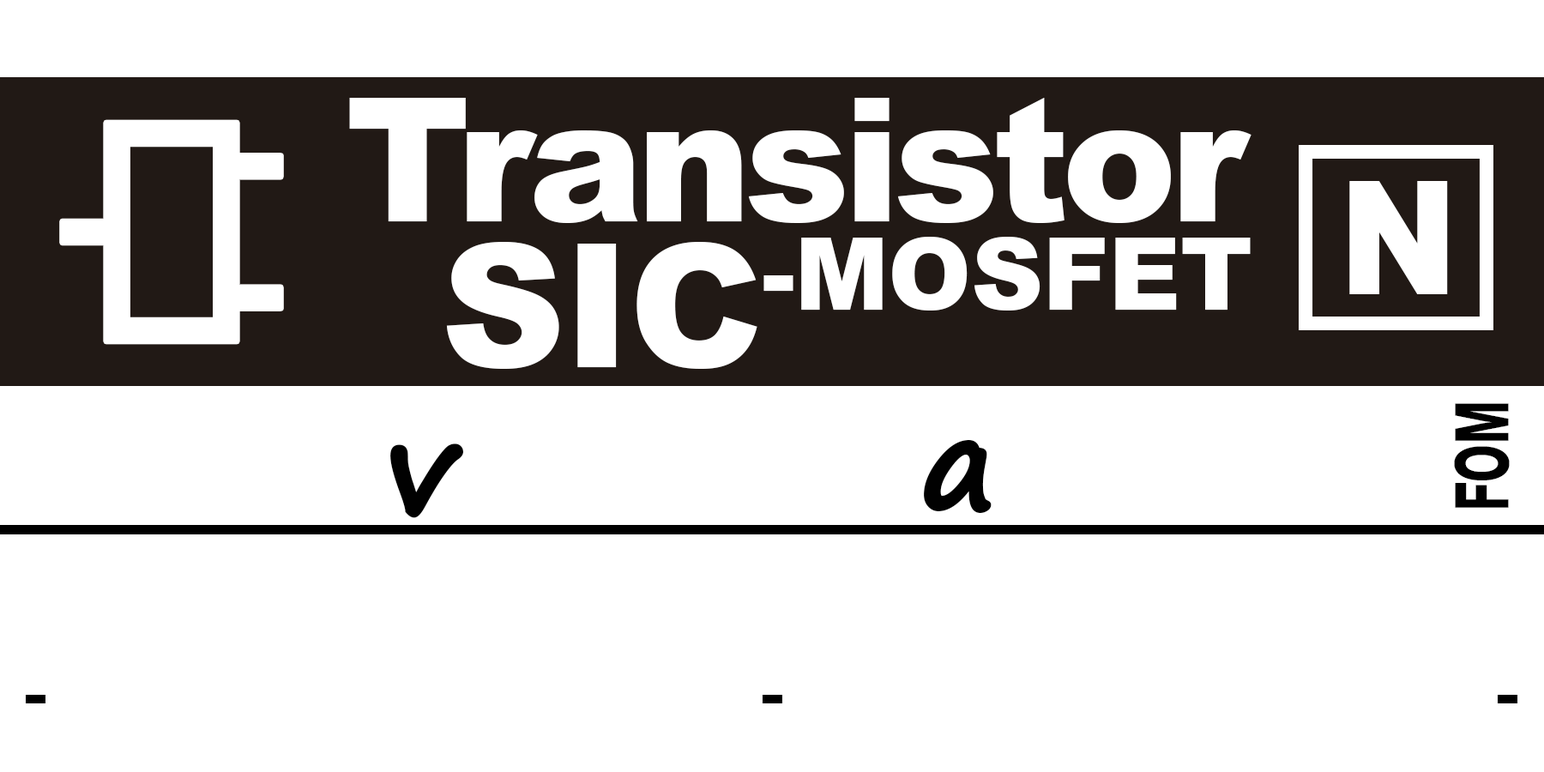
<style>
.page{position:relative;width:1544px;height:772px;background:#ffffff}
.page>*{position:absolute;margin:0}
.t1{font:172.5px/145.3px "Arial-Black";letter-spacing:-0.04em;color:#ffffff}
.t2{font:172.5px/145.3px "Arial-Black";letter-spacing:-0.01em;color:#ffffff}
.t3{font:157.9px "Arial-Black";letter-spacing:-0.01em;color:#ffffff;scale:0.9 1}
.t4{font:95.7px "Arial-BoldMT";letter-spacing:-0.025em;color:#010101;font-variant:small-caps;scale:0.62 1}
.t5{font:127.1px "SegoePrint-Bold";letter-spacing:-0.01em;color:#010101;font-weight:bold}
.t6{font:127.1px "Arial-BoldMT";letter-spacing:-0.01em;color:#010101}
</style>
<div class="page">
<p class="t1" style="left:349px;top:98px;width:903px;height:271px;text-align:right">Transistor<br><span class="t2">SIC-MOSFET</span></p>
<p class="t3" style="left:1350px;top:181px;width:98px;height:113px">N</p>
<p class="t4" style="left:1454px;top:403px;width:56px;height:105px;rotate:-90deg">fom</p>
<p class="t5" style="left:390px;top:444px;width:74px;height:74px">v</p>
<p class="t5" style="left:924px;top:439px;width:68px;height:75px"><span class="t6">   </span>a</p>
</div>
